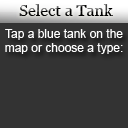
<style>
.page{position:relative;width:128px;height:128px;background:#333333}
.page>*{position:absolute;margin:0}
.t1{font:16px "Georgia"}
.t2{font:12px "ArialMT";color:#ffffff}
</style>
<div class="page">
<p class="t1" style="left:19px;top:4px;width:94px;height:12px">Select a Tank</p>
<p class="t2" style="left:5px;top:29px;width:118px;height:25px;text-align:center">Tap a blue tank on the<br>map or choose a type:</p>
</div>
